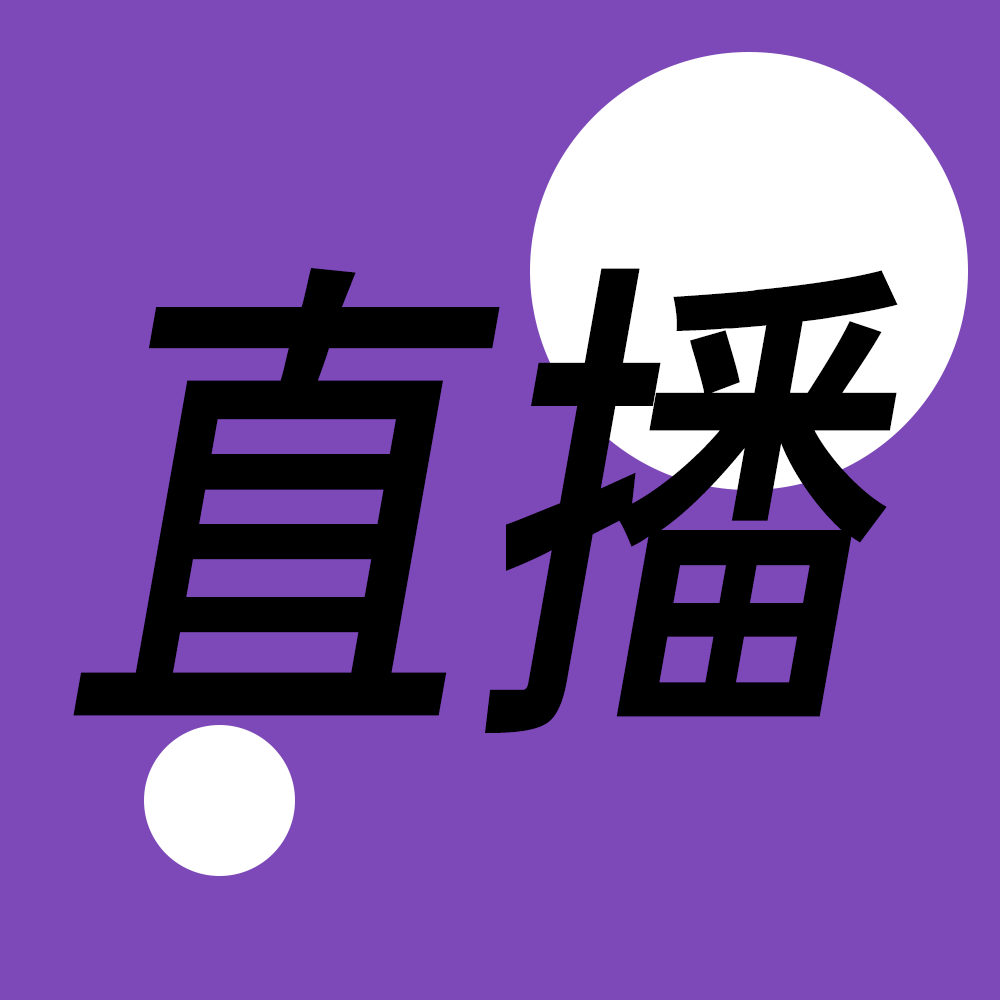
<style>
.page{position:relative;width:1000px;height:1000px;background:#7d49b8}
.page>*{position:absolute;margin:0}
.t1{font:507px "GlowSansSC-Compressed-Medium";color:#000000;font-style:italic}
</style>
<div class="page">
<p class="t1" style="left:73px;top:268px;width:825px;height:465px">直播</p>
</div>
